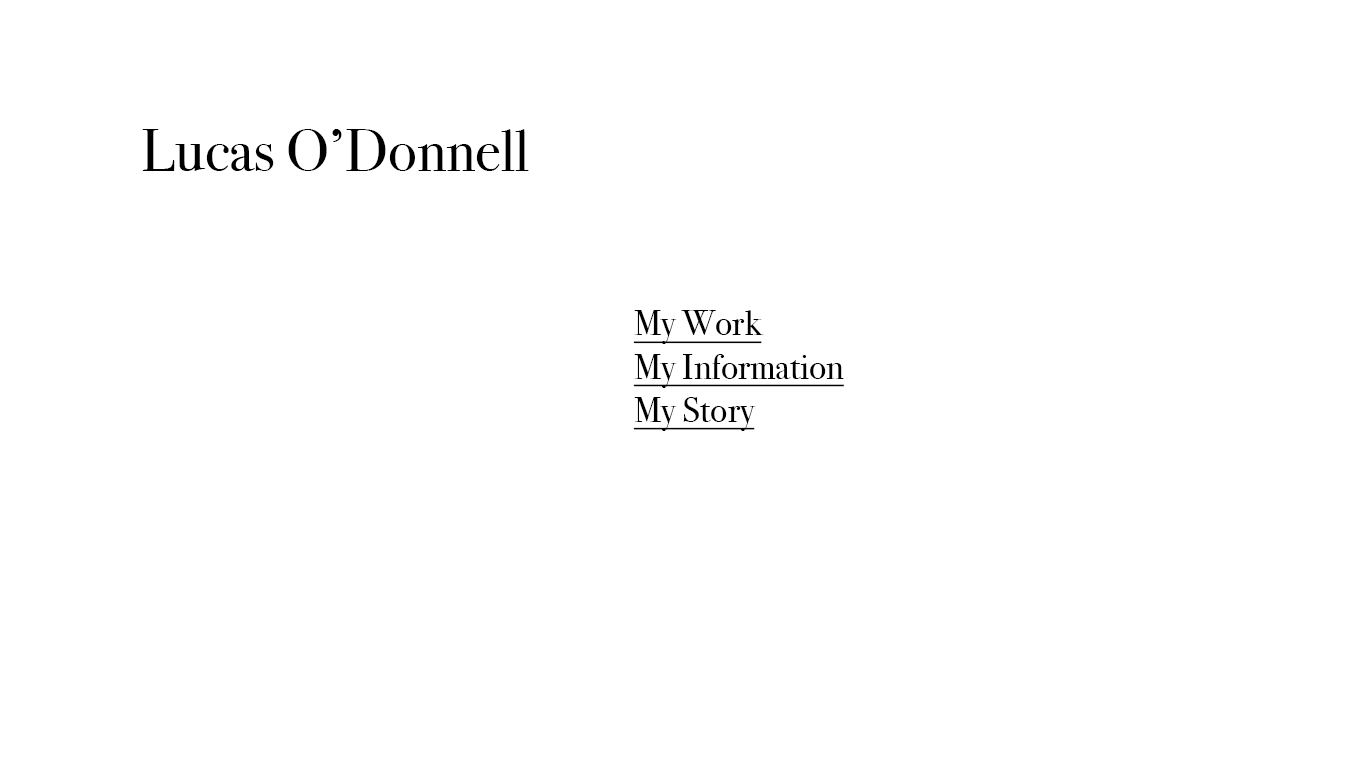
<style>
.page{position:relative;width:1366px;height:768px;background:#ffffff}
.page>*{position:absolute;margin:0}
.t1{font:60px "BodoniSvtyTwoOSITCTT-Book";color:#000000}
.t2{font:36px "BodoniSvtyTwoOSITCTT-Book";color:#000000;text-decoration:underline}
</style>
<div class="page">
<p class="t1" style="left:142px;top:129px;width:387px;height:42px">Lucas O’Donnell</p>
<p class="t2" style="left:633px;top:310px;width:211px;height:121px">My Work<br>My Information<br>My Story</p>
</div>
